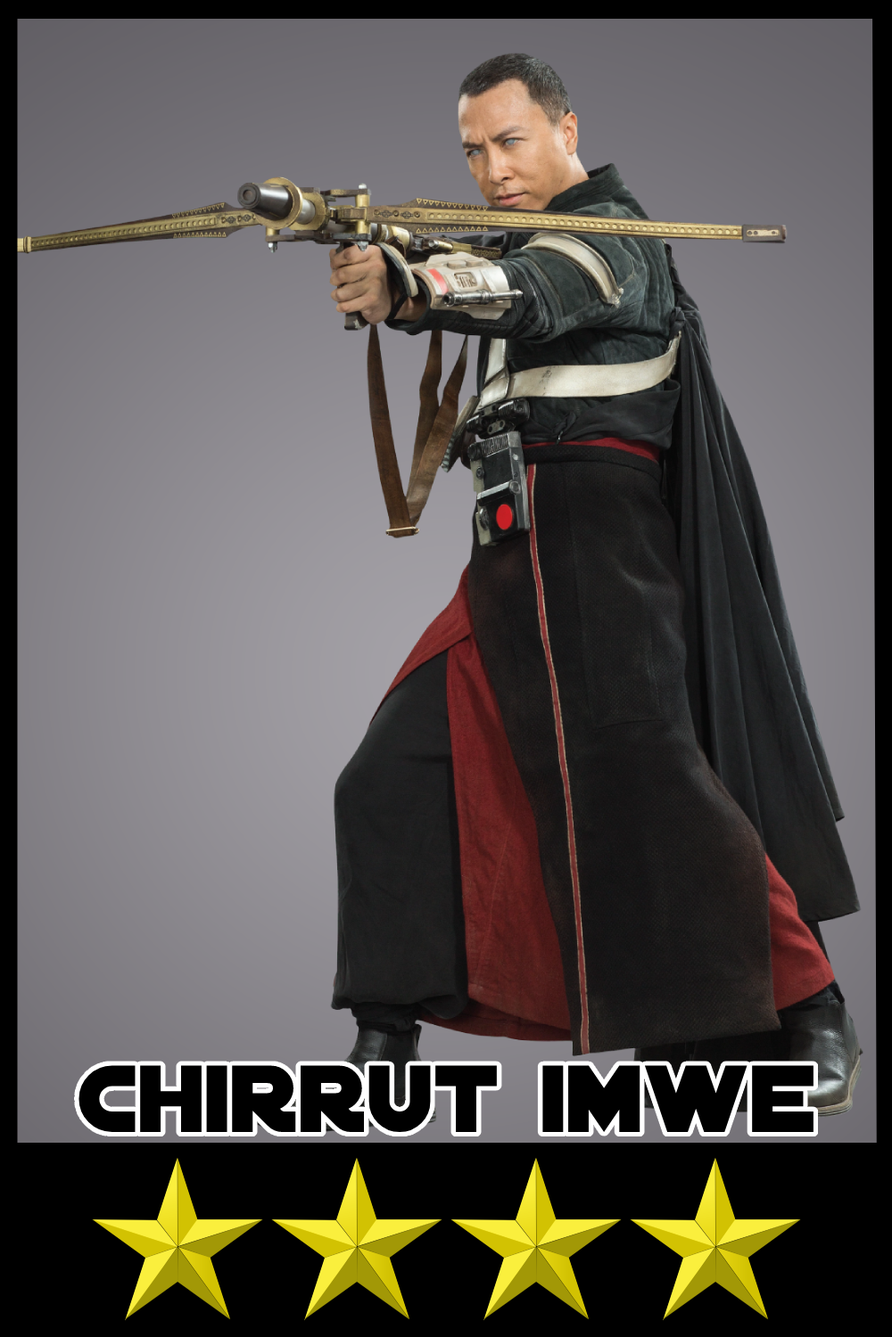
<style>
.page{position:relative;width:892px;height:1337px}
.page>*{position:absolute;margin:0}
.t1{font:102.1px "DistantGalaxy";color:#000000}
</style>
<div class="page">
<p class="t1" style="left:78px;top:1065px;width:735px;height:67px">Chirrut imwe</p>
</div>
